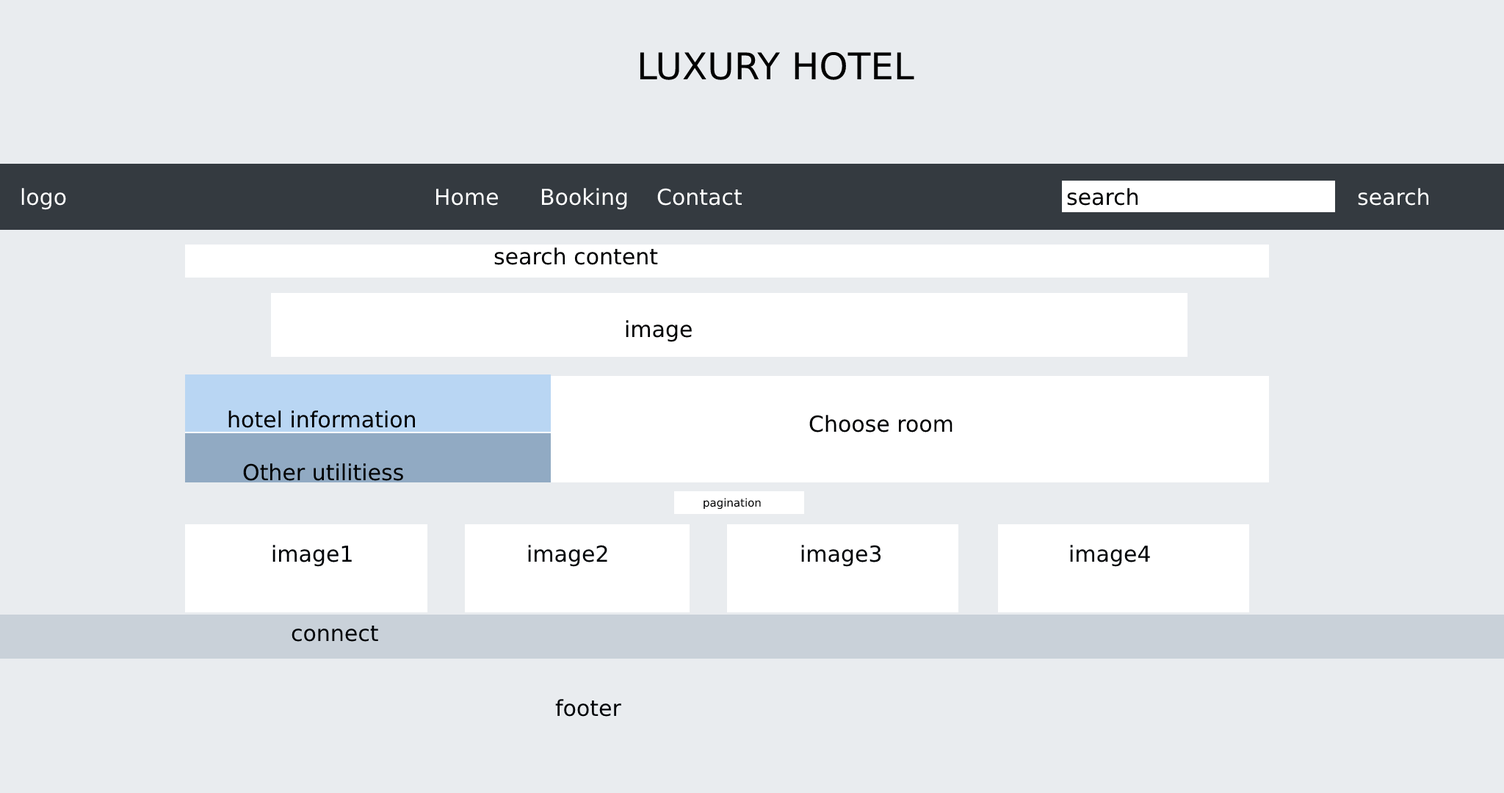
<style>
.page{position:relative;width:1504px;height:793px;background:#e9ecef}
.page>*{position:absolute;margin:0}
.t1{font:36.7px "DejaVuSans";color:#000000}
.t2{font:22px "DejaVuSans";color:#ffffff}
.t3{font:22px "DejaVuSans";color:#000203}
.t4{font:11px "DejaVuSans";color:#000203}
.t5{font:22px "DejaVuSans";color:#020508}
</style>
<div class="page">
<p class="t1" style="left:640px;top:51px;width:274px;height:29px">LUXURY HOTEL</p>
<p class="t2" style="left:21px;top:188px;width:45px;height:22px">logo</p>
<p class="t2" style="left:435px;top:189px;width:63px;height:17px">Home</p>
<p class="t2" style="left:541px;top:188px;width:86px;height:22px">Booking</p>
<p class="t2" style="left:657px;top:188px;width:85px;height:18px">Contact</p>
<p class="t3" style="left:1067px;top:188px;width:71px;height:18px">search</p>
<p class="t2" style="left:1358px;top:188px;width:71px;height:18px">search</p>
<p class="t3" style="left:494px;top:247px;width:164px;height:18px">search content</p>
<p class="t3" style="left:626px;top:320px;width:66px;height:22px">image</p>
<p class="t3" style="left:228px;top:410px;width:188px;height:18px">hotel information</p>
<p class="t3" style="left:809px;top:415px;width:143px;height:17px">Choose room</p>
<p class="t3" style="left:243px;top:463px;width:160px;height:18px">Other utilitiess</p>
<p class="t4" style="left:703px;top:498px;width:58px;height:12px">pagination</p>
<p class="t5" style="left:272px;top:545px;width:80px;height:22px">image1</p>
<p class="t5" style="left:528px;top:545px;width:79px;height:22px">image2</p>
<p class="t5" style="left:801px;top:545px;width:80px;height:22px">image3</p>
<p class="t5" style="left:1070px;top:545px;width:80px;height:22px">image4</p>
<p class="t5" style="left:291px;top:625px;width:87px;height:17px">connect</p>
<p class="t5" style="left:555px;top:699px;width:66px;height:18px">footer</p>
</div>
